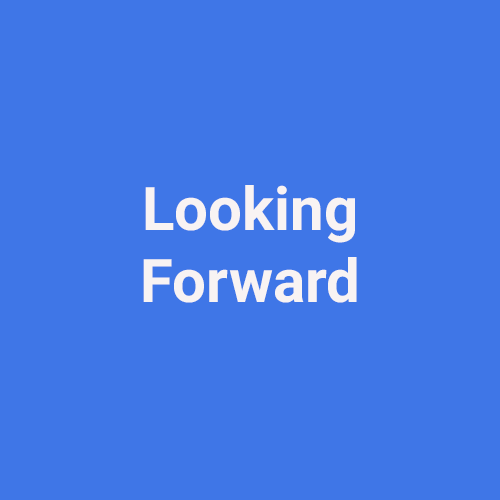
<style>
.page{position:relative;width:500px;height:500px;background:#3f76e7}
.page>*{position:absolute;margin:0}
.t1{font:60px "Roboto-Bold";color:#f8f3f3}
</style>
<div class="page">
<p class="t1" style="left:143px;top:185px;width:214px;height:118px;text-align:center">Looking <br>Forward</p>
</div>
